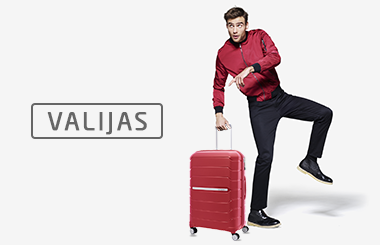
<style>
.page{position:relative;width:380px;height:245px;background:#f5f5f5}
.page>*{position:absolute;margin:0}
.t1{font:24px "NeoSansPro-Regular";letter-spacing:0.1em;color:#666666;font-weight:bold}
</style>
<div class="page">
<p class="t1" style="left:47px;top:112px;width:100px;height:23px">VALIJAS</p>
</div>
